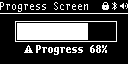
<style>
.page{position:relative;width:128px;height:64px;background:#000000}
.page>*{position:absolute;margin:0}
.t1{font:11px "Greybeard11px";color:#ffffff}
.t2{font:12px "Greybeard12pxBold";color:#ffffff}
</style>
<div class="page">
<p class="t1" style="left:0px;top:2px;width:88px;height:10px">Progress Screen</p>
<p class="t2" style="left:36px;top:45px;width:71px;height:10px">Progress 68%</p>
</div>
